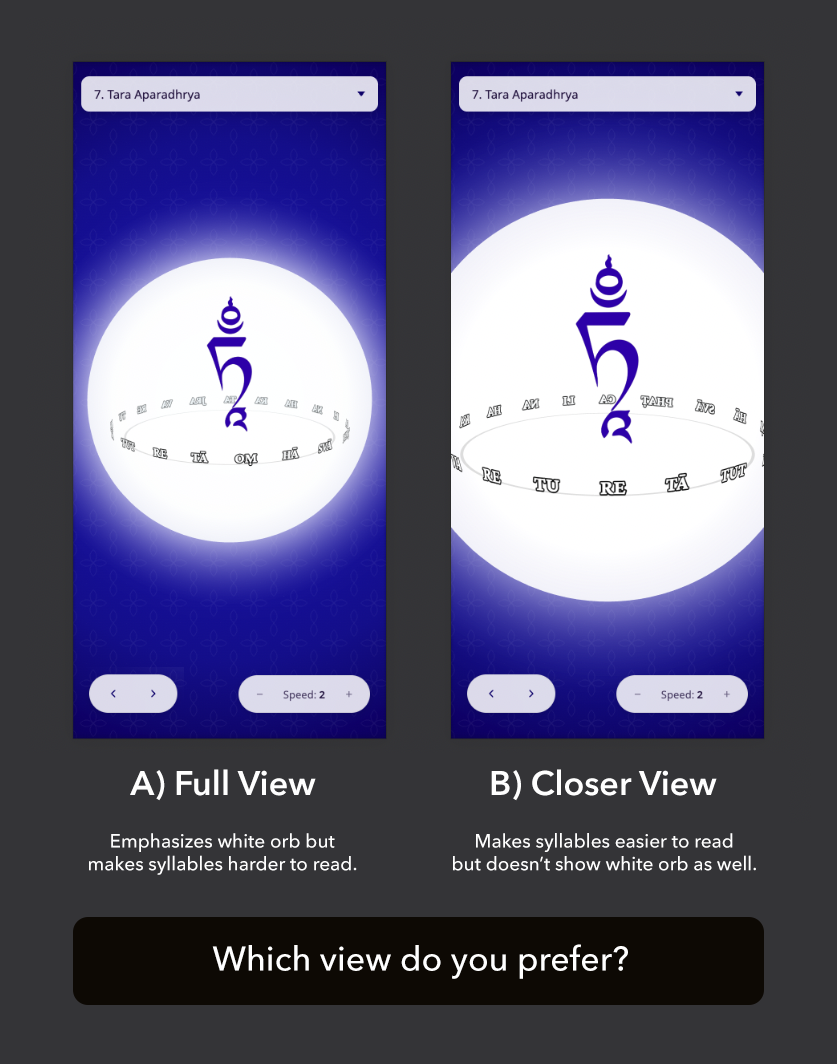
<style>
.page{position:relative;width:837px;height:1064px;background:#343437}
.page>*{position:absolute;margin:0}
.t1{font:34px "AvenirNextLTPro-Demi";color:#ffffff}
.t2{font:19px "AvenirNextLTPro-Medium";color:#ffffff}
.t3{font:34px "AvenirNextLTPro-Medium";color:#ffffff}
</style>
<div class="page">
<p class="t1" style="left:130px;top:769px;width:186px;height:32px">A) Full View</p>
<p class="t1" style="left:491px;top:769px;width:226px;height:32px">B) Closer View</p>
<p class="t2" style="left:89px;top:833px;width:268px;height:42px;text-align:center">Emphasizes white orb but<br>makes syllables harder to read.</p>
<p class="t2" style="left:453px;top:833px;width:303px;height:38px;text-align:center">Makes syllables easier to read<br>but doesn’t show white orb as well.</p>
<p class="t3" style="left:212px;top:944px;width:416px;height:35px">Which view do you prefer?</p>
</div>
